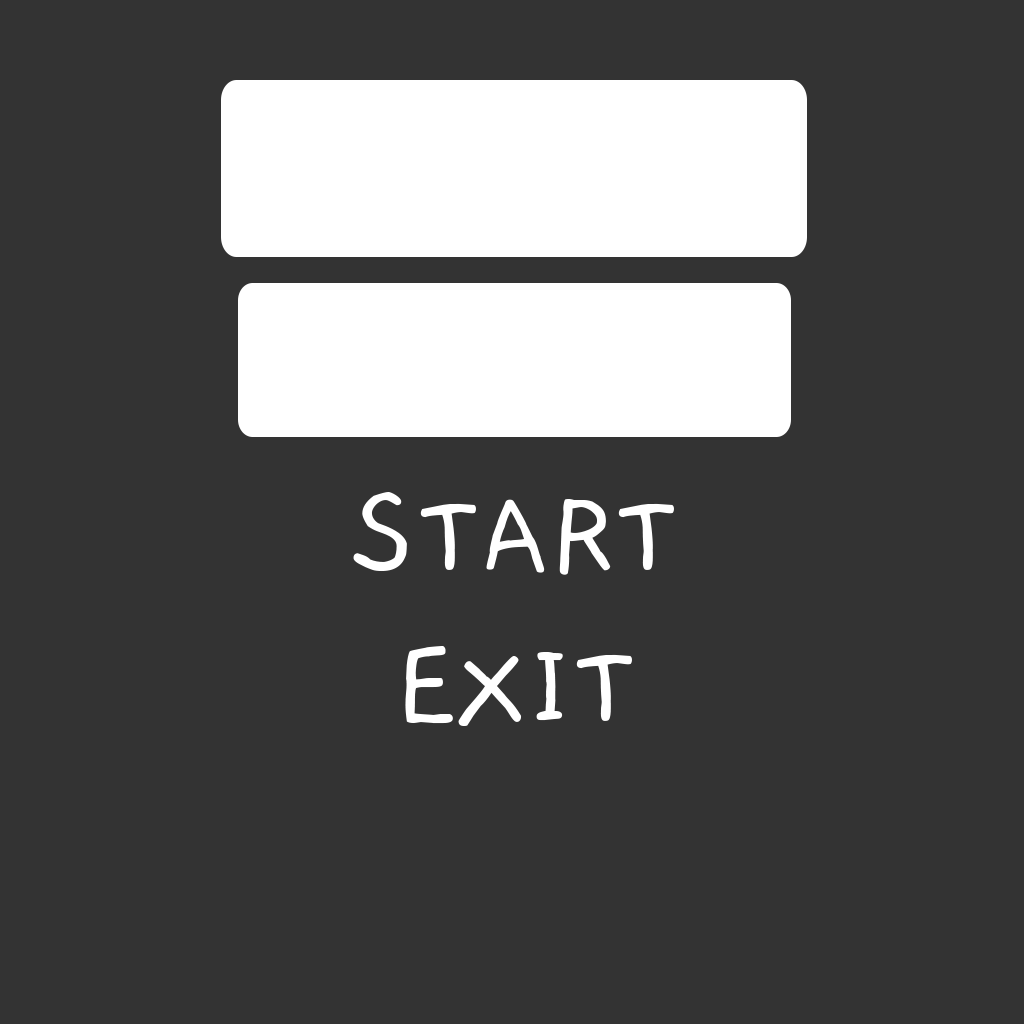
<style>
.page{position:relative;width:1024px;height:1024px;background:#333333}
.page>*{position:absolute;margin:0}
.t1{font:129px "Gaegu-Regular";color:#ffffff}
</style>
<div class="page">
<p class="t1" style="left:353px;top:492px;width:321px;height:83px">START</p>
<p class="t1" style="left:405px;top:646px;width:227px;height:80px">EXIT</p>
</div>
